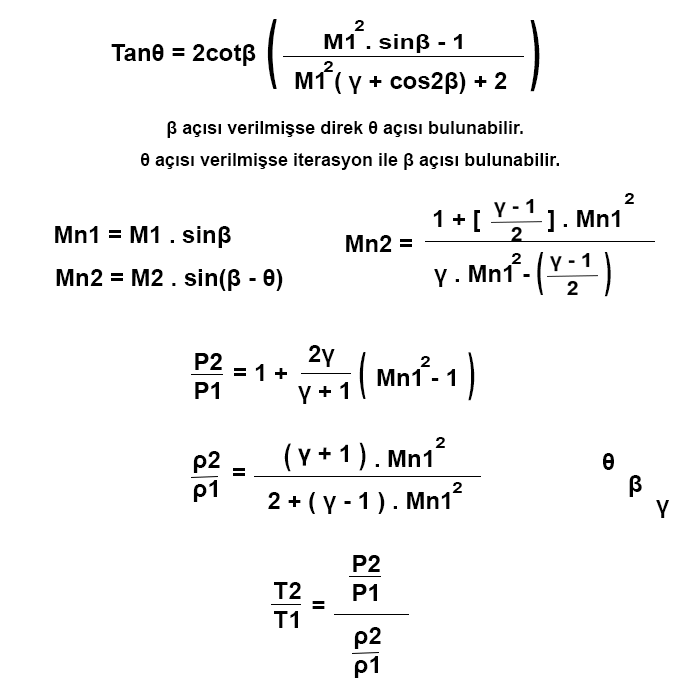
<style>
.page{position:relative;width:700px;height:700px;background:#ffffff}
.page>*{position:absolute;margin:0}
.t1{font:76.1px "Arial-BoldMT";color:#000000;scale:0.47 1}
.t2{font:15.1px "Arial-BoldMT";color:#000000;scale:1.29 1}
.t3{font:20.7px "Arial-BoldMT";color:#000000;scale:1.2 1}
.t4{font:24px "Arial-BoldMT";color:#000000}
.t5{font:18px "Arial-BoldMT";color:#000000}
.t6{font:47px "Arial-BoldMT";color:#000000;scale:0.51 1}
.t7{font:51.2px "Arial-BoldMT";color:#000000;scale:0.47 1}
.t8{font:29.5px "Arial-BoldMT";color:#000000;scale:0.81 1}
.t9{font:29.6px "Arial-BoldMT";color:#000000;scale:0.81 1}
</style>
<div class="page">
<p class="t1" style="left:267px;top:19px;width:10px;height:70px">(</p>
<p class="t2" style="left:354px;top:20px;width:10px;height:11px">2</p>
<p class="t1" style="left:530px;top:20px;width:10px;height:72px;rotate:180deg">(</p>
<p class="t3" style="left:324px;top:34px;width:138px;height:19px">M1 . sinβ - 1</p>
<p class="t4" style="left:111px;top:44px;width:145px;height:22px">Tanθ = 2cotβ</p>
<p class="t2" style="left:323px;top:61px;width:10px;height:11px">2</p>
<p class="t4" style="left:295px;top:72px;width:212px;height:22px">M1 ( γ + cos2β) + 2</p>
<p class="t5" style="left:167px;top:121px;width:356px;height:17px">β açısı verilmişse direk θ açısı bulunabilir.</p>
<p class="t5" style="left:141px;top:153px;width:418px;height:17px">θ açısı verilmişse iterasyon ile β açısı bulunabilir.</p>
<p class="t2" style="left:624px;top:193px;width:10px;height:11px">2</p>
<p class="t4" style="left:433px;top:210px;width:187px;height:22px">1 + [          ] . Mn1</p>
<p class="t4" style="left:55px;top:226px;width:176px;height:22px">Mn1 = M1 . sinβ</p>
<p class="t4" style="left:346px;top:235px;width:66px;height:17px">Mn2 =</p>
<p class="t2" style="left:511px;top:253px;width:10px;height:11px">2</p>
<p class="t6" style="left:537px;top:252px;width:7px;height:43px">(</p>
<p class="t6" style="left:604px;top:252px;width:7px;height:45px;rotate:180deg">(</p>
<p class="t4" style="left:56px;top:269px;width:227px;height:22px">Mn2 = M2 . sin(β - θ)</p>
<p class="t4" style="left:434px;top:265px;width:96px;height:22px">γ . Mn1 -</p>
<p class="t4" style="left:308px;top:345px;width:27px;height:22px">2γ</p>
<p class="t7" style="left:359px;top:352px;width:7px;height:47px">(</p>
<p class="t7" style="left:468px;top:352px;width:7px;height:49px;rotate:180deg">(</p>
<p class="t4" style="left:234px;top:364px;width:53px;height:17px">= 1 +</p>
<p class="t2" style="left:420px;top:356px;width:10px;height:11px">2</p>
<p class="t4" style="left:377px;top:369px;width:78px;height:17px">Mn1 - 1</p>
<p class="t4" style="left:298px;top:382px;width:50px;height:22px">γ + 1</p>
<p class="t2" style="left:435px;top:437px;width:10px;height:11px">2</p>
<p class="t8" style="left:284px;top:443px;width:7px;height:29px;rotate:1deg">(</p>
<p class="t4" style="left:298px;top:444px;width:50px;height:22px;rotate:1deg">γ + 1</p>
<p class="t9" style="left:359px;top:442px;width:7px;height:29px;rotate:-180deg">(</p>
<p class="t4" style="left:193px;top:451px;width:27px;height:51px">ρ2<br>ρ1</p>
<p class="t4" style="left:375px;top:450px;width:57px;height:17px">. Mn1</p>
<p class="t4" style="left:603px;top:453px;width:11px;height:17px">θ</p>
<p class="t4" style="left:233px;top:468px;width:12px;height:8px">=</p>
<p class="t2" style="left:452px;top:482px;width:10px;height:11px">2</p>
<p class="t4" style="left:629px;top:475px;width:13px;height:22px">β</p>
<p class="t4" style="left:268px;top:492px;width:182px;height:22px">2 + ( γ - 1 ) . Mn1</p>
<p class="t4" style="left:656px;top:500px;width:13px;height:18px">γ</p>
<p class="t4" style="left:274px;top:582px;width:27px;height:46px">T2<br>T1</p>
<p class="t4" style="left:312px;top:601px;width:13px;height:8px">=</p>
<p class="t4" style="left:354px;top:627px;width:27px;height:51px">ρ2<br>ρ1</p>
</div>
